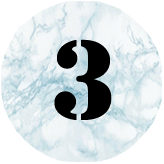
<style>
.page{position:relative;width:164px;height:164px;background:#ffffff}
.page>*{position:absolute;margin:0}
.t1{font:103.8px "StencilStd";color:#000000}
</style>
<div class="page">
<p class="t1" style="left:54px;top:39px;width:58px;height:81px">3</p>
</div>
